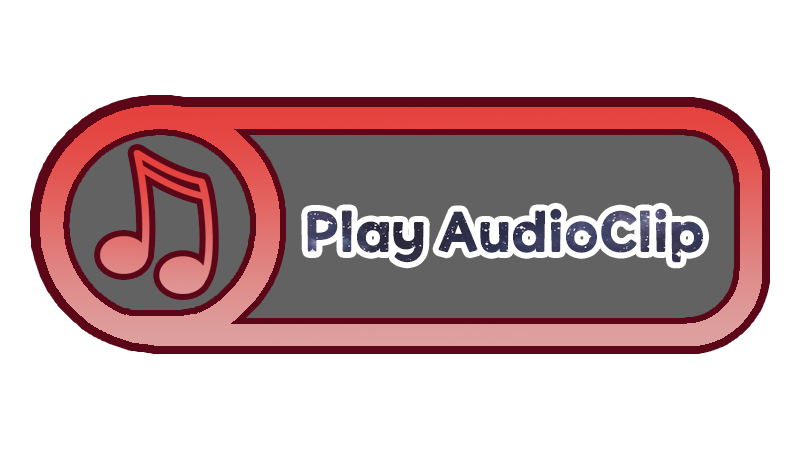
<style>
.page{position:relative;width:800px;height:450px;background:#ffffff}
.page>*{position:absolute;margin:0}
.t1{font:54px "ONEMobilePOPOTFRegular"}
</style>
<div class="page">
<p class="t1" style="left:307px;top:208px;width:396px;height:55px">Play AudioClip</p>
</div>
